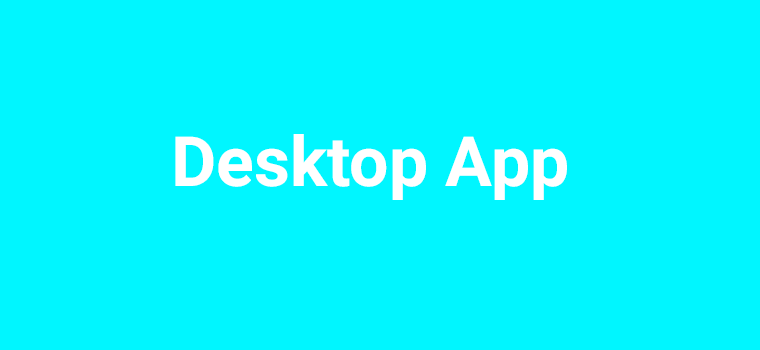
<style>
.page{position:relative;width:760px;height:350px;background:#00f6ff}
.page>*{position:absolute;margin:0}
.t1{font:69.2px "Roboto-Bold";color:#ffffff}
</style>
<div class="page">
<p class="t1" style="left:175px;top:134px;width:392px;height:66px">Desktop App</p>
</div>
